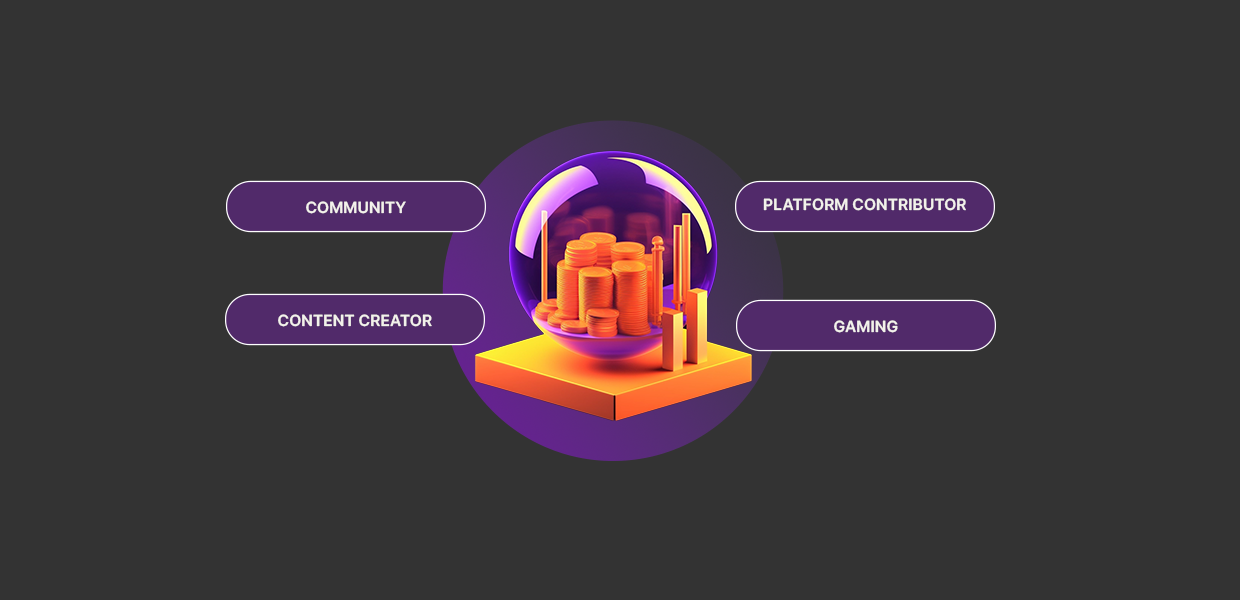
<style>
.page{position:relative;width:1240px;height:600px;background:#333333}
.page>*{position:absolute;margin:0}
.t1{font:15.4px "Inter-SemiBold";color:#f3f2eb;text-transform:uppercase}
</style>
<div class="page">
<p class="t1" style="left:763px;top:198px;width:203px;height:13px">Platform Contributor</p>
<p class="t1" style="left:306px;top:201px;width:100px;height:13px">Community</p>
<p class="t1" style="left:278px;top:314px;width:154px;height:13px">Content Creator</p>
<p class="t1" style="left:834px;top:320px;width:64px;height:13px">Gaming</p>
</div>
